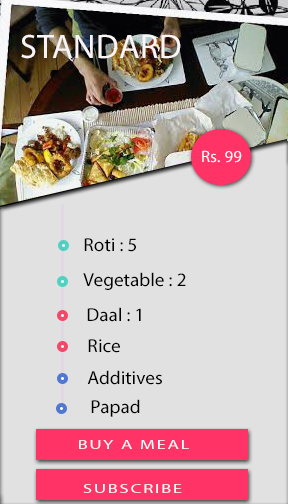
<style>
.page{position:relative;width:288px;height:504px;background:#e2e1e1}
.page>*{position:absolute;margin:0}
.t1{font:34px "MyriadPro-Regular";letter-spacing:0.015em;color:#f9f3f4}
.t2{font:16.6px "MyriadPro-Regular";letter-spacing:0.015em;color:#ffffff}
.t3{font:18.8px "MyriadPro-Regular";color:#000000}
.t4{font:12.9px "MyriadPro-Regular";letter-spacing:0.1em;color:#ffffff;scale:1.43 1}
</style>
<div class="page">
<p class="t1" style="left:21px;top:34px;width:160px;height:25px">STANDARD</p>
<p class="t2" style="left:202px;top:150px;width:40px;height:13px">Rs. 99</p>
<p class="t3" style="left:84px;top:238px;width:52px;height:14px">Roti : 5</p>
<p class="t3" style="left:83px;top:272px;width:103px;height:18px">Vegetable : 2</p>
<p class="t3" style="left:87px;top:307px;width:54px;height:15px">Daal : 1</p>
<p class="t3" style="left:88px;top:339px;width:32px;height:14px">Rice</p>
<p class="t3" style="left:87px;top:370px;width:75px;height:15px">Additives</p>
<p class="t3" style="left:91px;top:399px;width:49px;height:18px">Papad</p>
<p class="t4" style="left:79px;top:440px;width:110px;height:9px">BUY A MEAL</p>
<p class="t4" style="left:83px;top:484px;width:99px;height:9px">SUBSCRIBE</p>
</div>
